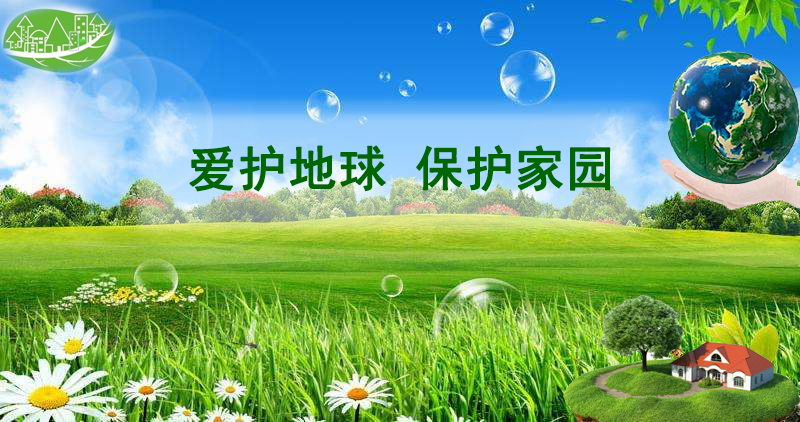
<style>
.page{position:relative;width:800px;height:422px}
.page>*{position:absolute;margin:0}
.t1{font:48px "SimHei";letter-spacing:0.02em;color:#006600;font-weight:bold}
</style>
<div class="page">
<p class="t1" style="left:189px;top:145px;width:422px;height:47px">爱护地球 保护家园</p>
</div>
